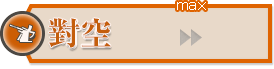
<style>
.page{position:relative;width:274px;height:69px;background:#e8d9c9}
.page>*{position:absolute;margin:0}
.t1{font:32px "RyuminPr6N-ExBold";color:#c45e0c}
</style>
<div class="page">
<p class="t1" style="left:49px;top:18px;width:62px;height:30px">對空</p>
</div>
